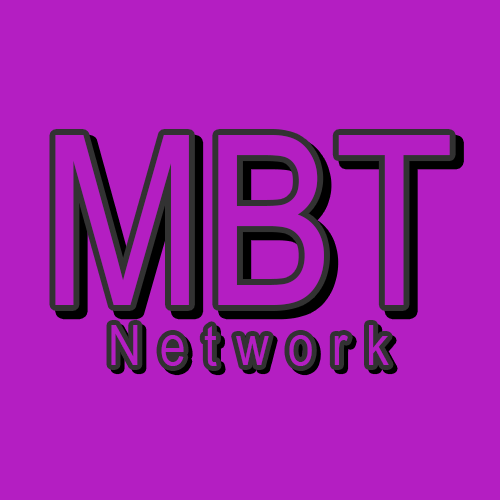
<style>
.page{position:relative;width:500px;height:500px;background:#b41ec2}
.page>*{position:absolute;margin:0}
.t1{font:237.9px "ArialNarrow";color:#b41ec2}
.t2{font:55.5px "ArialNarrow";letter-spacing:0.34em;color:#b41ec2}
</style>
<div class="page">
<p class="t1" style="left:55px;top:135px;width:395px;height:170px">MBT</p>
<p class="t2" style="left:111px;top:325px;width:278px;height:41px">Network</p>
</div>
